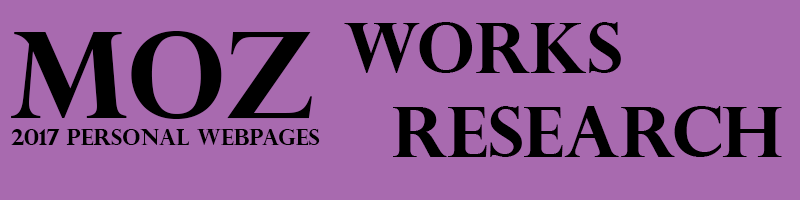
<style>
.page{position:relative;width:800px;height:200px;background:#a86aaf}
.page>*{position:absolute;margin:0}
.t1{font:70px "PerpetuaTitlingMT-Bold";color:#000000}
.t2{font:22px "PerpetuaTitlingMT-Bold";color:#000000}
.t3{font:120px "PerpetuaTitlingMT-Bold";color:#000000}
.t4{font:20px "PerpetuaTitlingMT-Bold";color:#000000}
</style>
<div class="page">
<p class="t1" style="left:344px;top:22px;width:438px;height:135px">Works <br>  Research</p>
<p class="t2" style="left:11px;top:31px;width:309px;height:114px"><span class="t3">MoZ<br></span>2017 PERSONAL WEBPAGES<span class="t4"></span></p>
</div>
